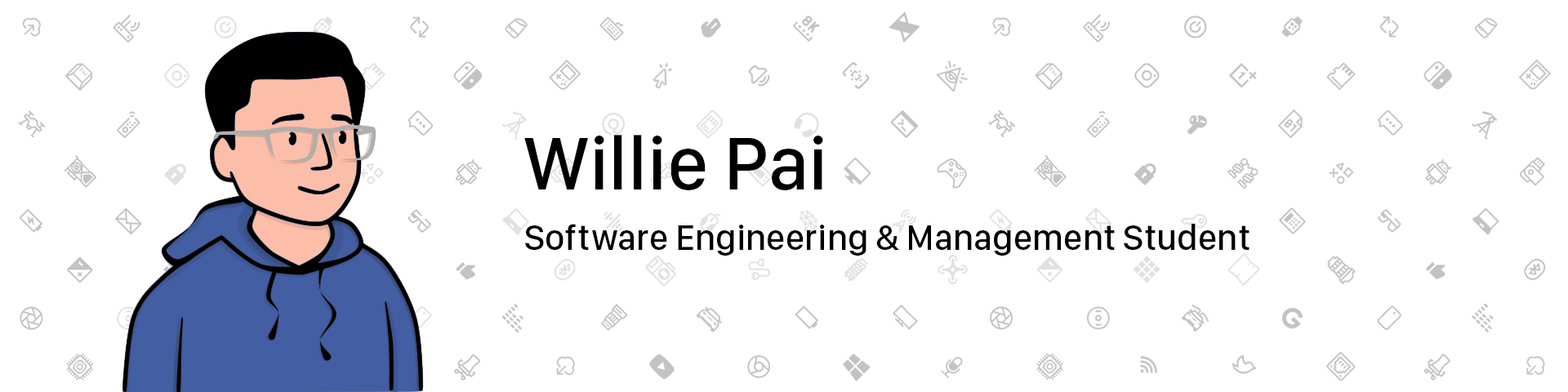
<style>
.page{position:relative;width:1568px;height:392px;background:#ffffff}
.page>*{position:absolute;margin:0}
.t1{font:77.8px "SFCompactDisplay-Medium";color:#000000}
.t2{font:36.2px "SFCompactDisplay-Medium";color:#000000}
</style>
<div class="page">
<p class="t1" style="left:524px;top:135px;width:299px;height:55px">Willie Pai</p>
<p class="t2" style="left:525px;top:224px;width:725px;height:32px">Software Engineering &amp; Management Student</p>
</div>
